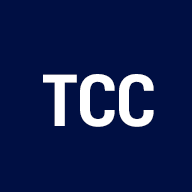
<style>
.page{position:relative;width:192px;height:192px;background:#000f43}
.page>*{position:absolute;margin:0}
.t1{font:72px "Roboto-BoldCondensed";color:#ffffff}
</style>
<div class="page">
<p class="t1" style="left:43px;top:74px;width:111px;height:53px">TCC</p>
</div>
